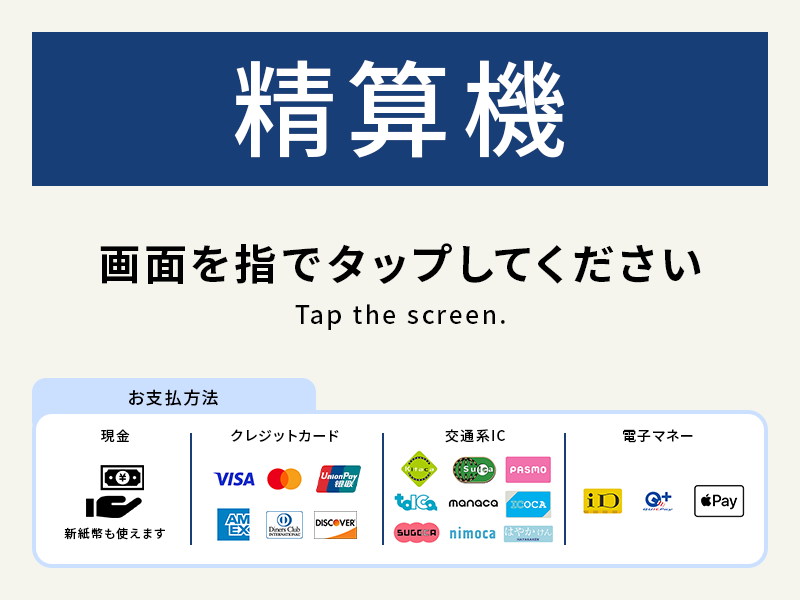
<style>
.page{position:relative;width:800px;height:600px;background:#f5f5ed}
.page>*{position:absolute;margin:0}
.t1{font:105.3px "SourceHanSans-Medium";letter-spacing:0.1em;color:#ffffff}
.t2{font:42.6px "SourceHanSans-Bold";letter-spacing:0.1em;color:#000000}
.t3{font:25.1px "SourceHanSans-Medium";letter-spacing:0.1em;color:#000000}
.t4{font:17.1px "SourceHanSans-Medium";letter-spacing:0.1em;color:#000000}
.t5{font:14px "SourceHanSans-Medium";letter-spacing:0.1em;color:#000000}
.t6{font:12px "SourceHanSans-Medium";letter-spacing:0.1em;color:#000000}
</style>
<div class="page">
<p class="t1" style="left:234px;top:60px;width:331px;height:98px">精算機</p>
<p class="t2" style="left:100px;top:243px;width:601px;height:41px">画面を指でタップしてください</p>
<p class="t3" style="left:295px;top:304px;width:210px;height:26px">Tap the screen.</p>
<p class="t4" style="left:129px;top:389px;width:89px;height:17px">お支払方法</p>
<p class="t5" style="left:101px;top:429px;width:29px;height:14px">現金</p>
<p class="t5" style="left:231px;top:429px;width:108px;height:13px">クレジットカード</p>
<p class="t5" style="left:445px;top:429px;width:60px;height:14px">交通系IC</p>
<p class="t5" style="left:623px;top:429px;width:70px;height:14px">電子マネー</p>
<p class="t6" style="left:64px;top:527px;width:101px;height:13px">新紙幣も使えます</p>
</div>
